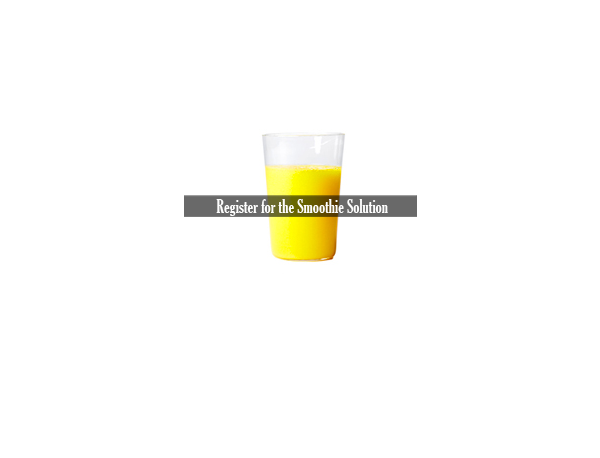
<style>
.page{position:relative;width:600px;height:458px;background:#ffffff}
.page>*{position:absolute;margin:0}
.t1{font:18px "GloucesterMT-ExtraCondensed";color:#fdfdfd}
</style>
<div class="page">
<p class="t1" style="left:216px;top:199px;width:172px;height:17px">Register for the Smoothie Solution</p>
</div>
